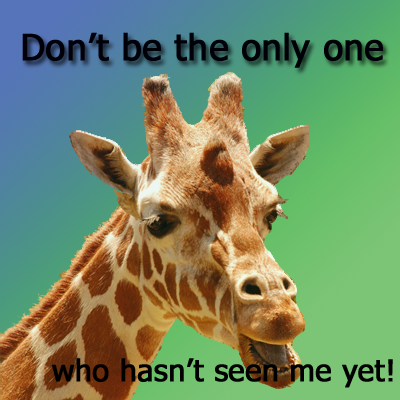
<style>
.page{position:relative;width:400px;height:400px}
.page>*{position:absolute;margin:0}
.t1{font:36px "Tahoma";color:#000008;font-weight:bold}
.t2{font:30px "Tahoma";color:#000000;font-weight:bold}
</style>
<div class="page">
<p class="t1" style="left:22px;top:32px;width:361px;height:36px">Don’t be the only one</p>
<p class="t2" style="left:52px;top:358px;width:341px;height:30px">who hasn’t seen me yet!</p>
</div>
